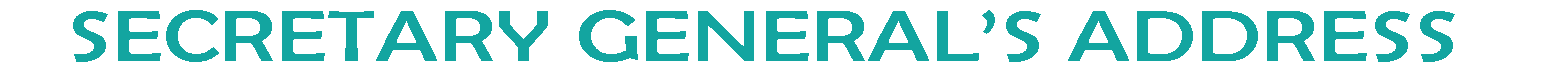
<style>
.page{position:relative;width:1547px;height:77px;background:#ffffff}
.page>*{position:absolute;margin:0}
.t1{font:72.9px "BerlinSansFB-Reg";color:#13a5a0;scale:1.31 1}
</style>
<div class="page">
<p class="t1" style="left:73px;top:10px;width:1382px;height:52px">SECRETARY GENERAL’S ADDRESS</p>
</div>
